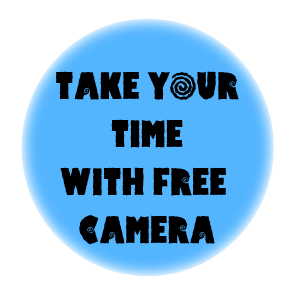
<style>
.page{position:relative;width:300px;height:300px;background:#ffffff}
.page>*{position:absolute;margin:0}
.t1{font:40px "HippoCritic";color:#000000}
</style>
<div class="page">
<p class="t1" style="left:56px;top:71px;width:183px;height:174px;text-align:center">TAKE YOUR<br>TIME<br>WITH FREE <br>CAMERA</p>
</div>
